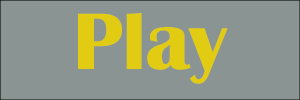
<style>
.page{position:relative;width:300px;height:100px;background:#8a9593}
.page>*{position:absolute;margin:0}
.t1{font:82.8px "BritannicBold";color:#e1cb13}
</style>
<div class="page">
<p class="t1" style="left:78px;top:13px;width:150px;height:71px">Play</p>
</div>
